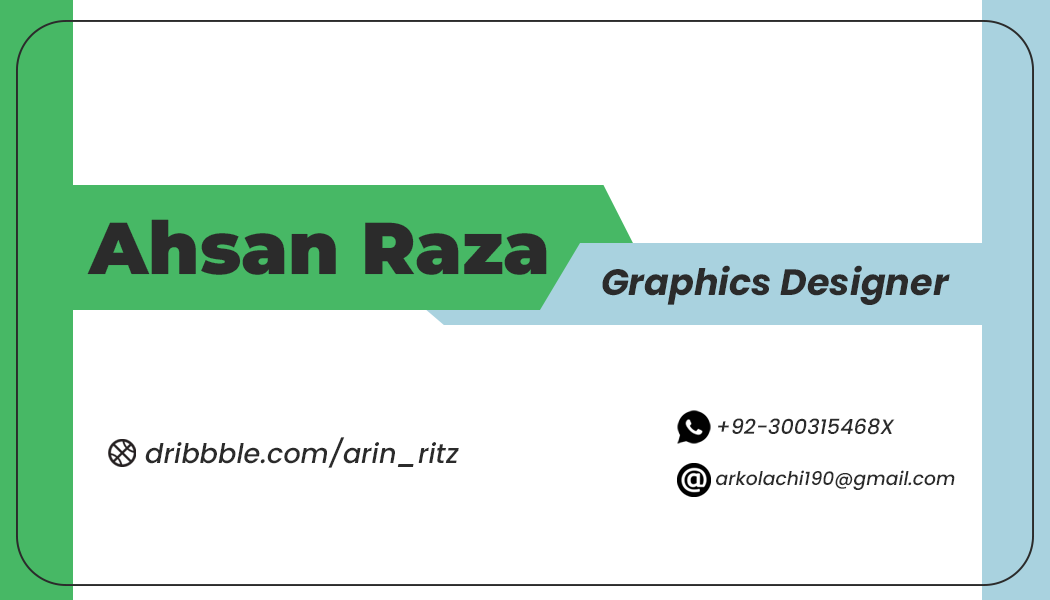
<style>
.page{position:relative;width:1050px;height:600px;background:#ffffff}
.page>*{position:absolute;margin:0}
.t1{font:73.1px "MontserratRoman-Black";color:#2b2b2b}
.t2{font:36.6px "Poppins-BoldItalic";color:#2b2b2b}
.t3{font:20.8px "Poppins-MediumItalic";color:#2b2b2b}
.t4{font:27.2px "Poppins-MediumItalic";color:#2b2b2b}
.t5{font:18.8px "Poppins-MediumItalic";color:#2b2b2b}
</style>
<div class="page">
<p class="t1" style="left:87px;top:219px;width:460px;height:56px">Ahsan Raza</p>
<p class="t2" style="left:602px;top:265px;width:348px;height:40px">Graphics Designer</p>
<p class="t3" style="left:718px;top:418px;width:177px;height:17px">+92-300315468X</p>
<p class="t4" style="left:145px;top:437px;width:314px;height:31px">dribbble.com/arin_ritz</p>
<p class="t5" style="left:716px;top:470px;width:239px;height:20px">arkolachi190@gmail.com</p>
</div>
